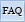
<style>
.page{position:relative;width:25px;height:22px}
.page>*{position:absolute;margin:0}
.t1{font:10px "Georgia";color:#000000}
</style>
<div class="page">
<p class="t1" style="left:2px;top:7px;width:20px;height:9px">FAQ</p>
</div>
